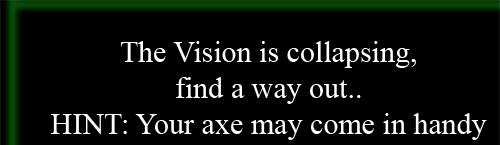
<style>
.page{position:relative;width:500px;height:145px;background:#000000}
.page>*{position:absolute;margin:0}
.t1{font:29.9px "TimesNewRomanPSMT";color:#ffffff}
</style>
<div class="page">
<p class="t1" style="left:51px;top:41px;width:436px;height:99px;text-align:center">The Vision is collapsing,<br>find a way out..<br>HINT: Your axe may come in handy</p>
</div>
